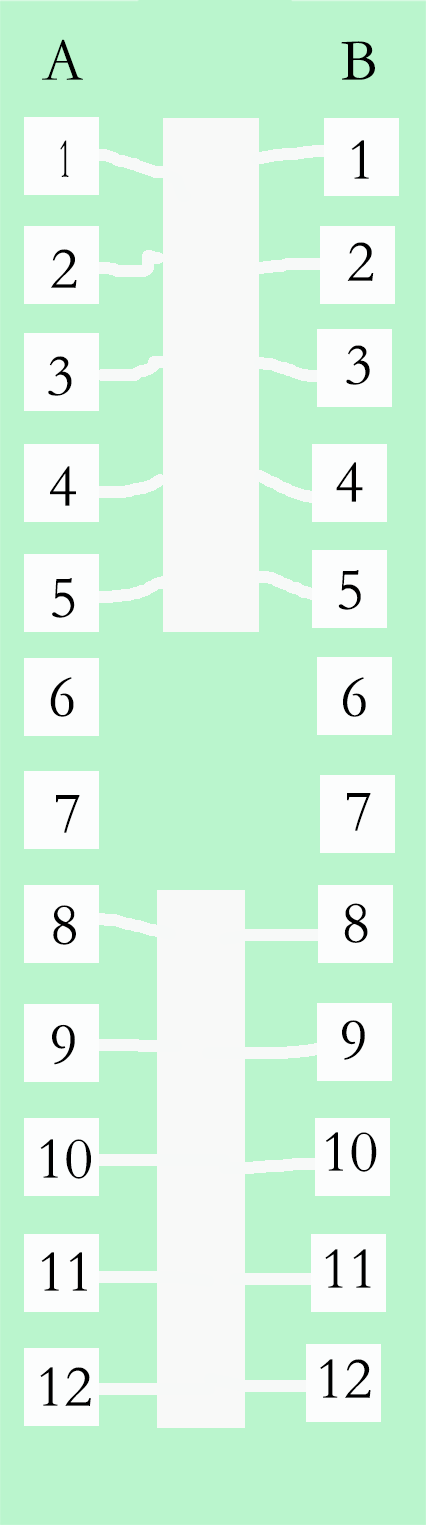
<style>
.page{position:relative;width:426px;height:1525px;background:#baf5cd}
.page>*{position:absolute;margin:0}
.t1{font:60px "STSong";color:#000000}
.t2{font:56.7px "STSong";color:#000000;scale:0.49 1}
</style>
<div class="page">
<p class="t1" style="left:42px;top:39px;width:41px;height:41px">A</p>
<p class="t1" style="left:341px;top:41px;width:34px;height:39px">B</p>
<p class="t2" style="left:60px;top:140px;width:9px;height:37px">1</p>
<p class="t1" style="left:351px;top:140px;width:18px;height:39px">1</p>
<p class="t1" style="left:347px;top:242px;width:27px;height:39px">2</p>
<p class="t1" style="left:51px;top:249px;width:26px;height:39px">2</p>
<p class="t1" style="left:346px;top:345px;width:24px;height:40px">3</p>
<p class="t1" style="left:48px;top:356px;width:24px;height:40px">3</p>
<p class="t1" style="left:336px;top:462px;width:27px;height:40px">4</p>
<p class="t1" style="left:50px;top:466px;width:26px;height:40px">4</p>
<p class="t1" style="left:52px;top:578px;width:23px;height:40px">5</p>
<p class="t1" style="left:338px;top:570px;width:23px;height:40px">5</p>
<p class="t1" style="left:50px;top:677px;width:24px;height:40px">6</p>
<p class="t1" style="left:343px;top:677px;width:23px;height:40px">6</p>
<p class="t1" style="left:56px;top:795px;width:24px;height:38px">7</p>
<p class="t1" style="left:347px;top:793px;width:24px;height:38px">7</p>
<p class="t1" style="left:53px;top:905px;width:23px;height:40px">8</p>
<p class="t1" style="left:344px;top:903px;width:24px;height:40px">8</p>
<p class="t1" style="left:52px;top:1024px;width:23px;height:41px">9</p>
<p class="t1" style="left:342px;top:1020px;width:23px;height:40px">9</p>
<p class="t1" style="left:326px;top:1132px;width:51px;height:40px">10</p>
<p class="t1" style="left:40px;top:1139px;width:51px;height:40px">10</p>
<p class="t1" style="left:41px;top:1252px;width:46px;height:39px">11</p>
<p class="t1" style="left:325px;top:1249px;width:46px;height:39px">11</p>
<p class="t1" style="left:320px;top:1359px;width:51px;height:39px">12</p>
<p class="t1" style="left:40px;top:1367px;width:51px;height:39px">12</p>
</div>
